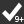
<style>
.page{position:relative;width:24px;height:24px;background:#333333}
.page>*{position:absolute;margin:0}
.t1{font:8px "ArialMT";color:#ffffff}
</style>
<div class="page">
<p class="t1" style="left:15px;top:16px;width:9px;height:6px">9+</p>
</div>
